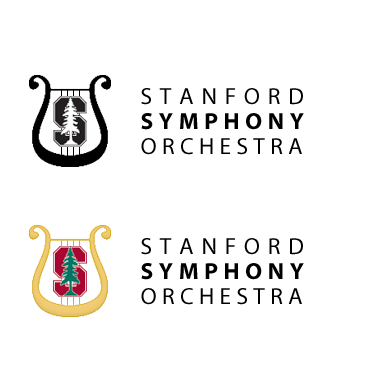
<style>
.page{position:relative;width:370px;height:375px;background:#ffffff}
.page>*{position:absolute;margin:0}
.t1{font:23.5px "MyriadPro-Regular";letter-spacing:0.33em;color:#000000}
.t2{font:23.5px "MyriadPro-Bold";letter-spacing:0.24em;color:#000000}
.t3{font:23.5px "MyriadPro-Regular";letter-spacing:0.226em;color:#000000}
</style>
<div class="page">
<p class="t1" style="left:141px;top:88px;width:162px;height:17px">STANFORD</p>
<p class="t2" style="left:141px;top:113px;width:163px;height:17px">SYMPHONY</p>
<p class="t3" style="left:141px;top:138px;width:161px;height:17px">ORCHESTRA</p>
<p class="t1" style="left:141px;top:238px;width:162px;height:17px">STANFORD</p>
<p class="t2" style="left:141px;top:263px;width:163px;height:17px">SYMPHONY</p>
<p class="t3" style="left:141px;top:288px;width:161px;height:17px">ORCHESTRA</p>
</div>
